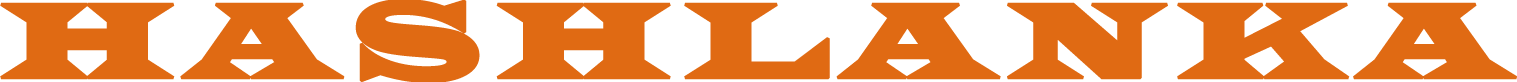
<style>
.page{position:relative;width:1517px;height:82px;background:#e06a13}
.page>*{position:absolute;margin:0}
.t1{font:110px "LatinWide";letter-spacing:0.1em;color:#e06a13;font-weight:bold}
</style>
<div class="page">
<p class="t1" style="left:0px;top:0px;width:1517px;height:82px">HASHLANKA</p>
</div>
